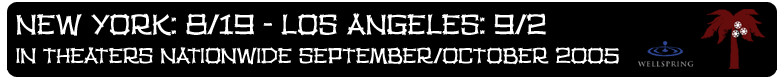
<style>
.page{position:relative;width:780px;height:79px;background:#000000}
.page>*{position:absolute;margin:0}
.t1{font:23px "TikiHut";color:#ffffff}
.t2{font:30px "TikiHut";color:#ffffff}
</style>
<div class="page">
<p class="t1" style="left:16px;top:13px;width:603px;height:52px"><span class="t2">NEW YORK: 8/19 - LOS ANGELES: 9/2<br></span>IN THEATERS NATIONWIDE SEPTEMBER/OCTOBER 2005</p>
</div>
